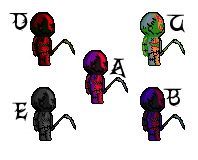
<style>
.page{position:relative;width:198px;height:160px;background:#ffffff}
.page>*{position:absolute;margin:0}
.t1{font:36px "CrEAtoRcAmpoTYPeSmcP";color:#000000}
</style>
<div class="page">
<p class="t1" style="left:9px;top:12px;width:19px;height:19px">D</p>
<p class="t1" style="left:166px;top:14px;width:19px;height:19px">C</p>
<p class="t1" style="left:109px;top:58px;width:17px;height:20px">A</p>
<p class="t1" style="left:163px;top:88px;width:19px;height:19px">B</p>
<p class="t1" style="left:12px;top:102px;width:16px;height:19px">E</p>
</div>
